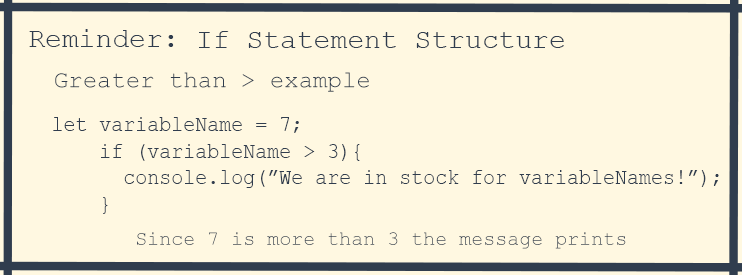
<style>
.page{position:relative;width:742px;height:275px;background:#fff8e1}
.page>*{position:absolute;margin:0}
.t1{font:28px "CourierNewPSMT";color:#303d4e}
.t2{font:24px "CourierNewPSMT";color:#303d4e}
.t3{font:22px "CourierNewPSMT";color:#303d4e;scale:0.91 1}
.t4{font:24px "CourierNewPS-BoldItalicMT";color:#303d4e;scale:0.91 1}
.t5{font:20px "CourierNewPSMT";color:#303d4e}
</style>
<div class="page">
<p class="t1" style="left:29px;top:29px;width:145px;height:18px">Reminder:</p>
<p class="t1" style="left:199px;top:31px;width:365px;height:17px">If Statement Structure</p>
<p class="t2" style="left:55px;top:72px;width:314px;height:20px">Greater than &gt; example</p>
<p class="t3" style="left:53px;top:117px;width:666px;height:97px"><span class="t4">  <br><br> </span>let variableName = 7;<br>     if (variableName &gt; 3){<br>       console.log(”We are in stock for variableNames!”);<br>     }</p>
<p class="t5" style="left:137px;top:232px;width:489px;height:17px">Since 7 is more than 3 the message prints</p>
</div>
